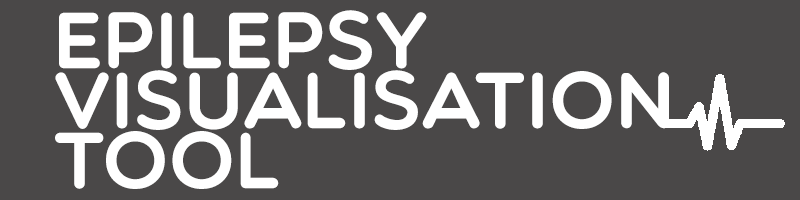
<style>
.page{position:relative;width:800px;height:200px;background:#4a4848}
.page>*{position:absolute;margin:0}
.t1{font:80px/60px "Multicolore";color:#ffffff}
</style>
<div class="page">
<p class="t1" style="left:55px;top:10px;width:614px;height:179px">epilepsy<br>visualisation<br>tool</p>
</div>
